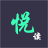
<style>
.page{position:relative;width:48px;height:48px;background:#363349}
.page>*{position:absolute;margin:0}
.t1{font:28.1px "STXingkai";color:#3cffb6}
.t2{font:9.4px "STXingkai";color:#f6f9f8}
</style>
<div class="page">
<p class="t1" style="left:11px;top:11px;width:24px;height:24px">悦</p>
<p class="t2" style="left:33px;top:32px;width:8px;height:8px">读</p>
</div>
